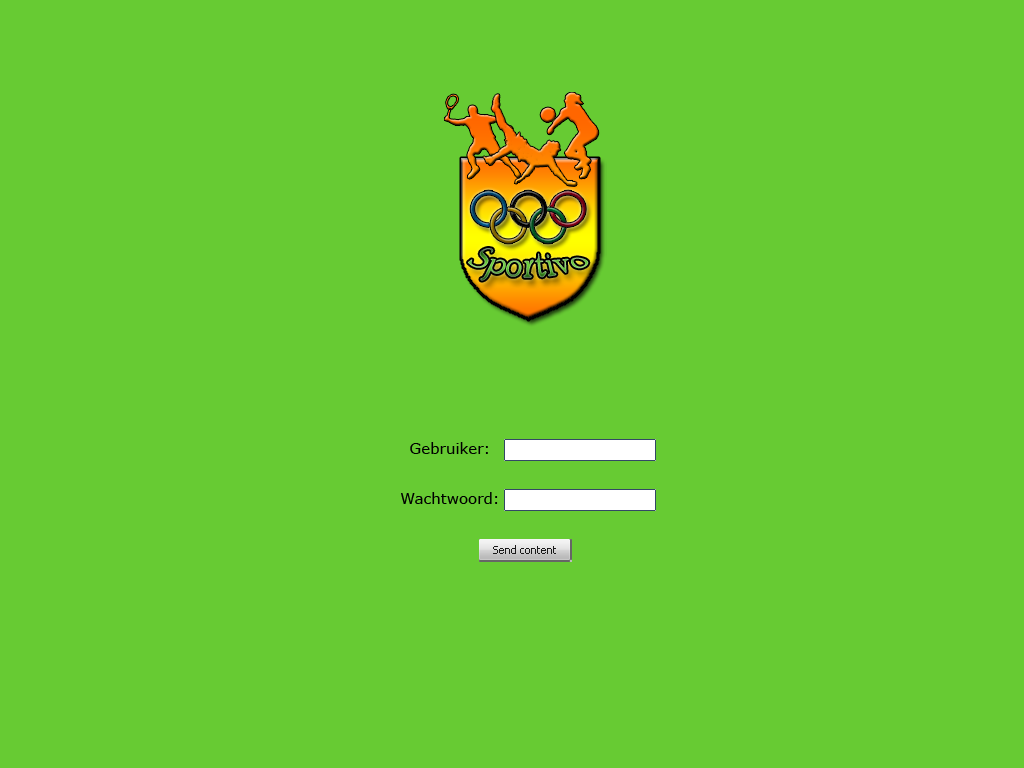
<style>
.page{position:relative;width:1024px;height:768px;background:#67cb33}
.page>*{position:absolute;margin:0}
.t1{font:15px "Verdana";color:#000000}
</style>
<div class="page">
<p class="t1" style="left:410px;top:442px;width:78px;height:12px">Gebruiker:</p>
<p class="t1" style="left:401px;top:492px;width:97px;height:12px">Wachtwoord:</p>
</div>
